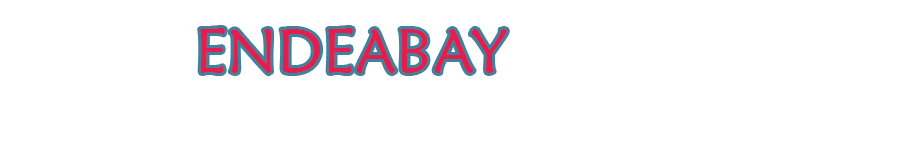
<style>
.page{position:relative;width:900px;height:150px;background:#ffffff}
.page>*{position:absolute;margin:0}
.t1{font:62.5px "MaiandraGD-Regular";color:#e11f4f}
</style>
<div class="page">
<p class="t1" style="left:200px;top:28px;width:307px;height:46px">ENDEABAY</p>
</div>
